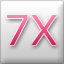
<style>
.page{position:relative;width:64px;height:64px}
.page>*{position:absolute;margin:0}
.t1{font:40.9px "Verdana"}
</style>
<div class="page">
<p class="t1" style="left:7px;top:15px;width:50px;height:30px">7X</p>
</div>
